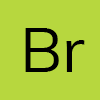
<style>
.page{position:relative;width:100px;height:100px;background:#b7d73e}
.page>*{position:absolute;margin:0}
.t1{font:62.5px "Muli-Regular";color:#000000}
</style>
<div class="page">
<p class="t1" style="left:25px;top:28px;width:60px;height:44px">Br</p>
</div>
